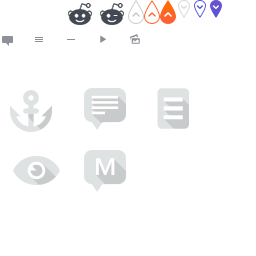
<style>
.page{position:relative;width:256px;height:256px;background:#ffffff}
.page>*{position:absolute;margin:0}
.t1{font:24px "SegoeUI-SemiBold";color:#ffffff}
</style>
<div class="page">
<p class="t1" style="left:96px;top:158px;width:19px;height:17px">M</p>
</div>
